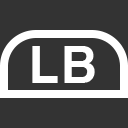
<style>
.page{position:relative;width:128px;height:128px;background:#333333}
.page>*{position:absolute;margin:0}
.t1{font:48px "H2gtrE";color:#ffffff}
</style>
<div class="page">
<p class="t1" style="left:32px;top:46px;width:63px;height:37px">LB</p>
</div>
